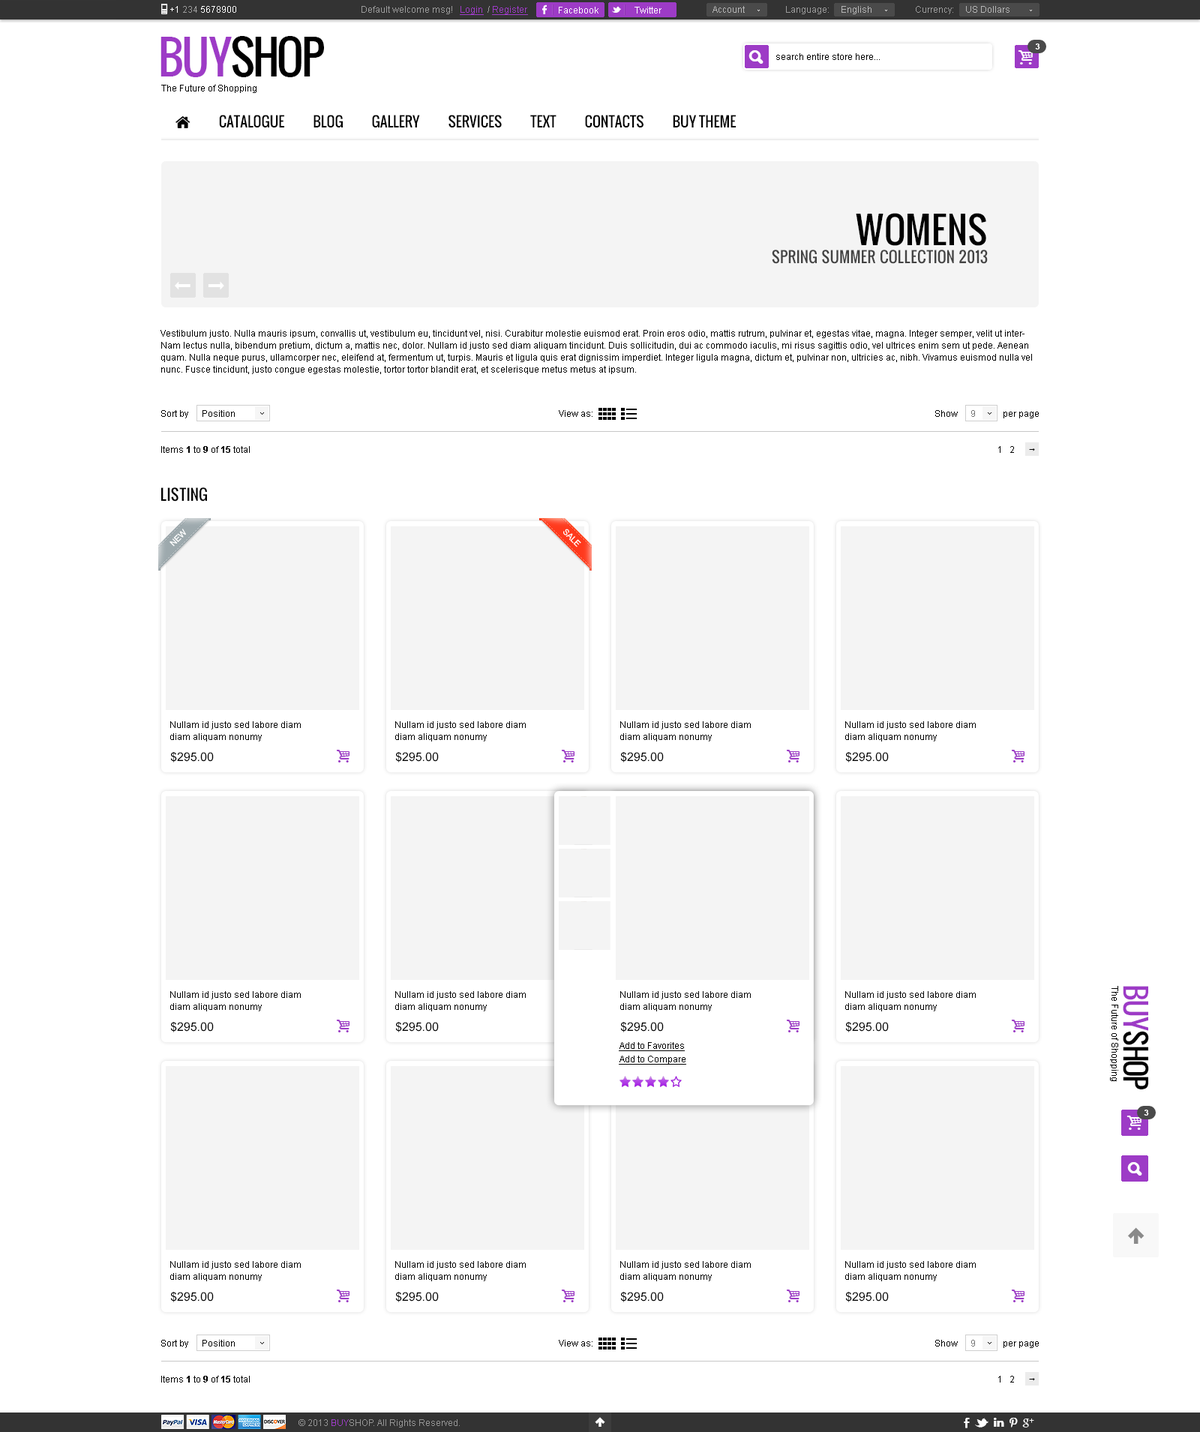
<style>
.page{position:relative;width:1200px;height:1432px;background:#ffffff}
.page>*{position:absolute;margin:0}
.t1{font:9px "ArialMT";color:#ffffff}
.t2{font:9px "ArialMT";color:#9b9b9b}
.t3{font:9px "ArialMT";color:#9d3bc6;text-decoration:underline}
.t4{font:9px "ArialMT";color:#b6b6b6}
.t5{font:45px "Oswald";letter-spacing:-0.06em;color:#000000;text-transform:uppercase}
.t6{font:45px "Oswald";letter-spacing:-0.06em;color:#9d3bc6;text-transform:uppercase}
.t7{font:9px "ArialMT";color:#000000}
.t8{font:8.2px "Arial-BoldMT";color:#ffffff;text-transform:uppercase}
.t9{font:15px "Oswald";color:#434343;text-transform:uppercase}
.t10{font:36px "Oswald";color:#000000;text-transform:uppercase}
.t11{font:9px/12px "ArialMT";color:#000000}
.t12{font:19.5px "andepict";color:#000000}
.t13{font:9px "ArialMT";color:#767676}
.t14{font:9px "Arial-BoldMT";color:#000000}
.t15{font:15px "Oswald";color:#000000;text-transform:uppercase}
.t16{font:12px "ArialMT";color:#000000}
.t17{font:28.5px "Oswald";letter-spacing:-0.06em;color:#000000;text-transform:uppercase}
.t18{font:28.5px "Oswald";letter-spacing:-0.06em;color:#9d3bc6;text-transform:uppercase}
.t19{font:9px/13.5px "ArialMT";color:#000000;text-decoration:underline}
.t20{font:9px "ArialMT";color:#959595}
.t21{font:9px "ArialMT";color:#9d3bc6}
</style>
<div class="page">
<p class="t1" style="left:170px;top:6px;width:66px;height:7px">+1 <span class="t2">234 </span>5678900</p>
<p class="t2" style="left:362px;top:6px;width:166px;height:9px">Default welcome msg!   <span class="t3">Login </span> / <span class="t3">Register</span></p>
<p class="t2" style="left:362px;top:6px;width:166px;height:9px">Default welcome msg!   <span class="t3">Login </span> / <span class="t3">Register</span></p>
<p class="t4" style="left:712px;top:6px;width:33px;height:7px">Account</p>
<p class="t2" style="left:786px;top:6px;width:86px;height:8px">Language:     <span class="t4">English</span></p>
<p class="t4" style="left:916px;top:6px;width:94px;height:8px"><span class="t2">Currency:     </span>US Dollars</p>
<p class="t1" style="left:559px;top:7px;width:39px;height:7px">Facebook</p>
<p class="t1" style="left:634px;top:7px;width:28px;height:7px">Twitter</p>
<p class="t5" style="left:160px;top:36px;width:164px;height:41px"><span class="t6">buy</span>shop</p>
<p class="t7" style="left:776px;top:53px;width:104px;height:7px">search entire store here...</p>
<p class="t8" style="left:1035px;top:44px;width:5px;height:6px">3</p>
<p class="t7" style="left:161px;top:85px;width:95px;height:8px">The Future of Shopping</p>
<p class="t9" style="left:772px;top:213px;width:216px;height:51px;text-align:right"><span class="t10">WOMENS<br></span>spring summer collection 2013</p>
<p class="t11" style="left:160px;top:330px;width:872px;height:44px">Vestibulum justo. Nulla mauris ipsum, convallis ut, vestibulum eu, tincidunt vel, nisi. Curabitur molestie euismod erat. Proin eros odio, mattis rutrum, pulvinar et, egestas vitae, magna. Integer semper, velit ut interNam lectus nulla, bibendum pretium, dictum a, mattis nec, dolor. Nullam id justo sed diam aliquam tincidunt. Duis sollicitudin, dui ac commodo iaculis, mi risus sagittis odio, vel ultrices enim sem ut pede. Aenean quam. Nulla neque purus, ullamcorper nec, eleifend at, fermentum ut, turpis. Mauris et ligula quis erat dignissim imperdiet. Integer ligula magna, dictum et, pulvinar non, ultricies ac, nibh. Vivamus euismod nulla vel nunc. Fusce tincidunt, justo congue egestas molestie, tortor tortor blandit erat, et scelerisque metus metus at ipsum.</p>
<p class="t7" style="left:161px;top:410px;width:27px;height:8px">Sort by</p>
<p class="t7" style="left:202px;top:410px;width:33px;height:7px">Position</p>
<p class="t7" style="left:559px;top:410px;width:33px;height:7px">View as:</p>
<p class="t12" style="left:598px;top:408px;width:39px;height:12px">⚏ ☰</p>
<p class="t7" style="left:935px;top:410px;width:104px;height:8px">Show                    per page</p>
<p class="t13" style="left:971px;top:410px;width:4px;height:7px">9</p>
<p class="t7" style="left:161px;top:446px;width:89px;height:7px">Items <span class="t14">1</span> to <span class="t14">9</span> of <span class="t14">15</span> total</p>
<p class="t7" style="left:998px;top:446px;width:16px;height:7px">1   2</p>
<p class="t15" style="left:161px;top:488px;width:46px;height:14px">LISTING</p>
<p class="t11" style="left:170px;top:722px;width:131px;height:20px">Nullam id justo sed labore diam<br>diam aliquam nonumy</p>
<p class="t11" style="left:395px;top:722px;width:131px;height:20px">Nullam id justo sed labore diam<br>diam aliquam nonumy</p>
<p class="t11" style="left:620px;top:722px;width:131px;height:20px">Nullam id justo sed labore diam<br>diam aliquam nonumy</p>
<p class="t11" style="left:845px;top:722px;width:131px;height:20px">Nullam id justo sed labore diam<br>diam aliquam nonumy</p>
<p class="t16" style="left:170px;top:752px;width:44px;height:11px">$295.00</p>
<p class="t16" style="left:395px;top:752px;width:44px;height:11px">$295.00</p>
<p class="t16" style="left:620px;top:752px;width:44px;height:11px">$295.00</p>
<p class="t16" style="left:845px;top:752px;width:44px;height:11px">$295.00</p>
<p class="t7" style="left:1110px;top:986px;width:8px;height:96px;rotate:90deg">The Future of Shopping</p>
<p class="t17" style="left:1123px;top:986px;width:26px;height:104px;rotate:90deg"><span class="t18">buy</span>shop</p>
<p class="t11" style="left:170px;top:992px;width:131px;height:20px">Nullam id justo sed labore diam<br>diam aliquam nonumy</p>
<p class="t11" style="left:395px;top:992px;width:131px;height:20px">Nullam id justo sed labore diam<br>diam aliquam nonumy</p>
<p class="t11" style="left:620px;top:992px;width:131px;height:20px">Nullam id justo sed labore diam<br>diam aliquam nonumy</p>
<p class="t11" style="left:620px;top:992px;width:131px;height:20px">Nullam id justo sed labore diam<br>diam aliquam nonumy</p>
<p class="t11" style="left:845px;top:992px;width:131px;height:20px">Nullam id justo sed labore diam<br>diam aliquam nonumy</p>
<p class="t16" style="left:170px;top:1022px;width:44px;height:11px">$295.00</p>
<p class="t16" style="left:395px;top:1022px;width:44px;height:11px">$295.00</p>
<p class="t16" style="left:620px;top:1022px;width:44px;height:11px">$295.00</p>
<p class="t16" style="left:620px;top:1022px;width:44px;height:11px">$295.00</p>
<p class="t16" style="left:845px;top:1022px;width:44px;height:11px">$295.00</p>
<p class="t19" style="left:619px;top:1042px;width:67px;height:23px">Add to Favorites<br>Add to Compare</p>
<p class="t8" style="left:1144px;top:1110px;width:5px;height:6px">3</p>
<p class="t11" style="left:170px;top:1262px;width:131px;height:20px">Nullam id justo sed labore diam<br>diam aliquam nonumy</p>
<p class="t11" style="left:395px;top:1262px;width:131px;height:20px">Nullam id justo sed labore diam<br>diam aliquam nonumy</p>
<p class="t11" style="left:620px;top:1262px;width:131px;height:20px">Nullam id justo sed labore diam<br>diam aliquam nonumy</p>
<p class="t11" style="left:845px;top:1262px;width:131px;height:20px">Nullam id justo sed labore diam<br>diam aliquam nonumy</p>
<p class="t16" style="left:170px;top:1292px;width:44px;height:11px">$295.00</p>
<p class="t16" style="left:395px;top:1292px;width:44px;height:11px">$295.00</p>
<p class="t16" style="left:620px;top:1292px;width:44px;height:11px">$295.00</p>
<p class="t16" style="left:845px;top:1292px;width:44px;height:11px">$295.00</p>
<p class="t7" style="left:161px;top:1340px;width:27px;height:8px">Sort by</p>
<p class="t7" style="left:202px;top:1340px;width:33px;height:7px">Position</p>
<p class="t7" style="left:559px;top:1340px;width:33px;height:7px">View as:</p>
<p class="t12" style="left:598px;top:1338px;width:39px;height:12px">⚏ ☰</p>
<p class="t7" style="left:935px;top:1340px;width:104px;height:8px">Show                    per page</p>
<p class="t13" style="left:971px;top:1340px;width:4px;height:7px">9</p>
<p class="t7" style="left:161px;top:1376px;width:89px;height:7px">Items <span class="t14">1</span> to <span class="t14">9</span> of <span class="t14">15</span> total</p>
<p class="t7" style="left:998px;top:1376px;width:16px;height:7px">1   2</p>
<p class="t20" style="left:298px;top:1420px;width:162px;height:8px">© 2013 <span class="t21">BUY</span>SHOP. All Rights Reserved.</p>
</div>
